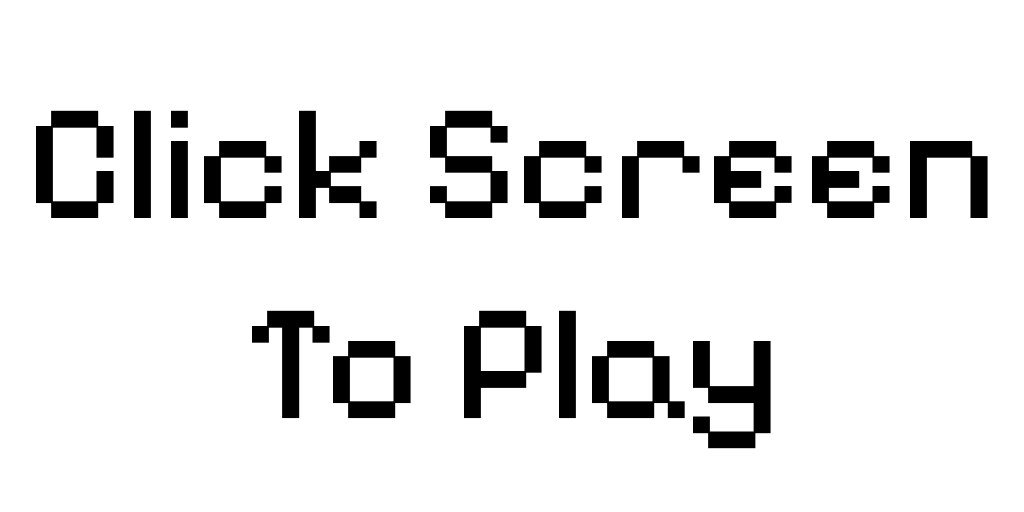
<style>
.page{position:relative;width:1024px;height:512px;background:#ffffff}
.page>*{position:absolute;margin:0}
.t1{font:166.7px "PixelifySans-Regular";color:#000000}
</style>
<div class="page">
<p class="t1" style="left:36px;top:110px;width:952px;height:339px;text-align:center">Click Screen<br>To Play</p>
</div>
